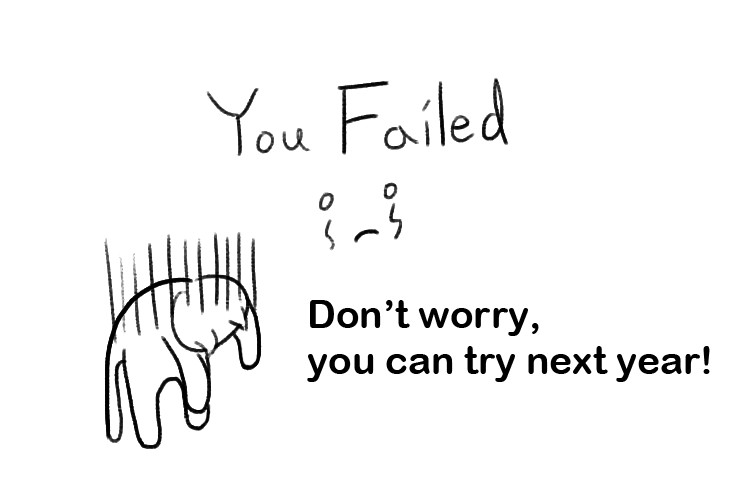
<style>
.page{position:relative;width:750px;height:500px;background:#ffffff}
.page>*{position:absolute;margin:0}
.t1{font:38.9px "ArialRoundedMTBold";color:#000000}
</style>
<div class="page">
<p class="t1" style="left:307px;top:300px;width:403px;height:82px">Don’t worry,<br>you can try next year!</p>
</div>
